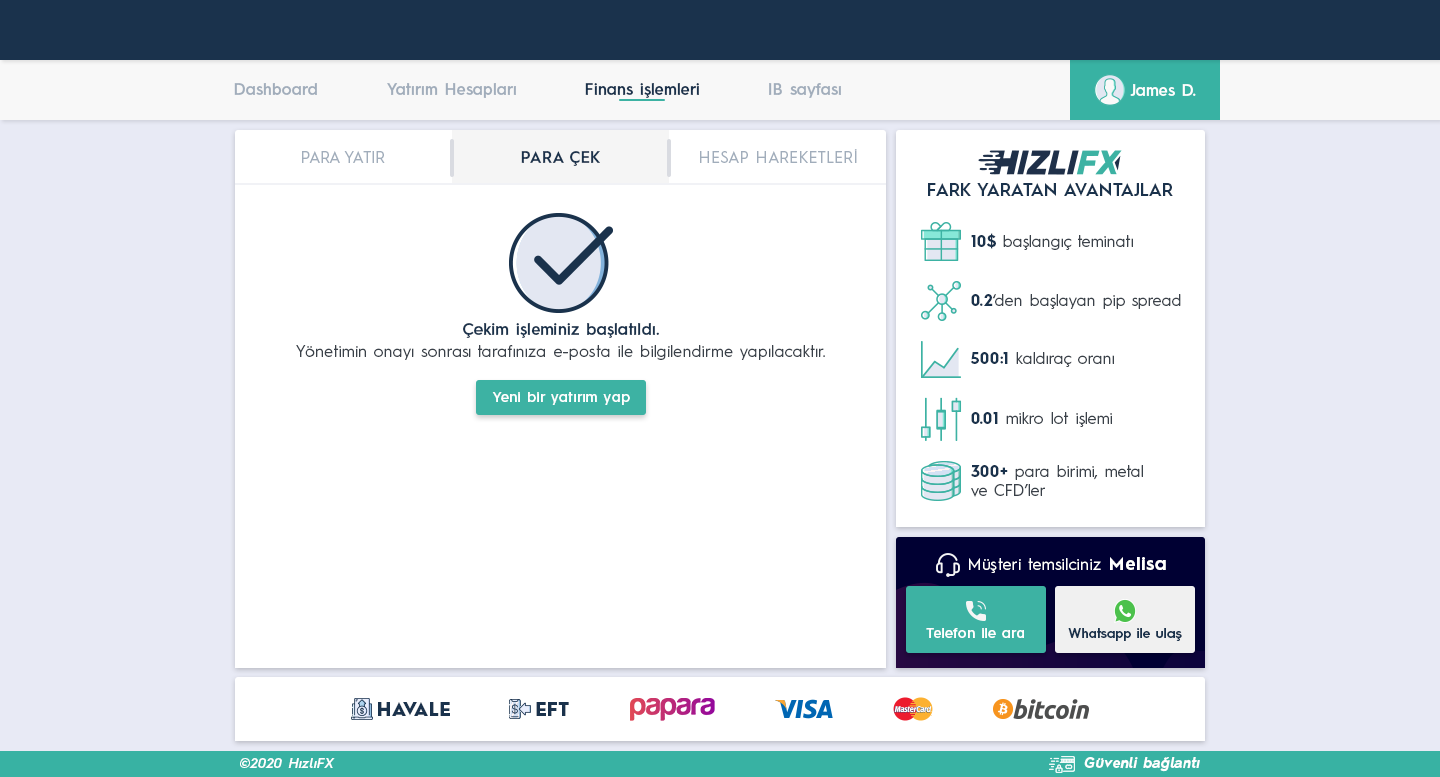
<style>
.page{position:relative;width:1440px;height:777px;background:#ffffff}
.page>*{position:absolute;margin:0}
.t1{font:16px "HurmeGeometricSans3-SemiBold";color:#a1adbb}
.t2{font:16px "HurmeGeometricSans3-SemiBold";color:#1a324c}
.t3{font:16px "HurmeGeometricSans3-SemiBold";color:#fefefe}
.t4{font:16px "HurmeGeometricSans1-Regular";letter-spacing:0.01em;color:#a1adbb}
.t5{font:16px "HurmeGeometricSans1-SemiBold";letter-spacing:0.01em;color:#1a324c}
.t6{font:18px "HurmeGeometricSans1-SemiBold";color:#1a324c}
.t7{font:16px "HurmeGeometricSans1-Regular";color:#3a4149}
.t8{font:16px "HurmeGeometricSans1-Bold";color:#1a324c}
.t9{font:16px "HurmeGeometricSans3-SemiBold";letter-spacing:0.01em;color:#1a324c}
.t10{font:16px "HurmeGeometricSans1-Regular";letter-spacing:0.01em;color:#3a4149}
.t11{font:14px "HurmeGeometricSans3-SemiBold";letter-spacing:0.025em;color:#ffffff}
.t12{font:16px "HurmeGeometricSans1-Regular";letter-spacing:0.025em;color:#ffffff}
.t13{font:18px "HurmeGeometricSans1-Bold";letter-spacing:0.05em;color:#ffffff}
.t14{font:14px "HurmeGeometricSans3-SemiBold";letter-spacing:0.01em;color:#ffffff}
.t15{font:13.5px "HurmeGeometricSans3-SemiBold";letter-spacing:0.01em;color:#1a324c}
.t16{font:18px "HurmeGeometricSans1-Black";letter-spacing:0.025em;color:#1a324c}
.t17{font:14px "HurmeGeometricSans2-SemiBoldObl";letter-spacing:0.025em;color:#ffffff}
.t18{font:14px "HurmeGeometricSans2-BoldObl";letter-spacing:0.025em;color:#ffffff}
</style>
<div class="page">
<p class="t1" style="left:234px;top:83px;width:83px;height:12px">Dashboard</p>
<p class="t1" style="left:387px;top:83px;width:129px;height:15px">Yatırım Hesapları</p>
<p class="t2" style="left:585px;top:83px;width:114px;height:15px">Finans işlemleri</p>
<p class="t1" style="left:769px;top:83px;width:72px;height:15px">IB sayfası</p>
<p class="t3" style="left:1130px;top:84px;width:66px;height:12px">James D.</p>
<p class="t4" style="left:700px;top:149px;width:157px;height:14px">HESAP HAREKETLERİ</p>
<p class="t4" style="left:302px;top:151px;width:83px;height:12px">PARA YATIR</p>
<p class="t5" style="left:521px;top:151px;width:79px;height:15px">PARA ÇEK</p>
<p class="t6" style="left:928px;top:183px;width:245px;height:13px">FARK YARATAN AVANTAJLAR</p>
<p class="t7" style="left:971px;top:233px;width:162px;height:17px"><span class="t8">10$</span> başlangıç teminatı</p>
<p class="t7" style="left:971px;top:294px;width:210px;height:15px"><span class="t8">0.2</span>‘den başlayan pip spread</p>
<p class="t9" style="left:463px;top:323px;width:196px;height:15px">Çekim işleminiz başlatıldı.</p>
<p class="t10" style="left:296px;top:345px;width:529px;height:15px">Yönetimin onayı sonrası tarafınıza e-posta ile bilgilendirme yapılacaktır.</p>
<p class="t7" style="left:970px;top:352px;width:144px;height:15px"><span class="t8">500:1</span> kaldıraç oranı</p>
<p class="t11" style="left:492px;top:392px;width:138px;height:13px">Yeni bir yatırım yap</p>
<p class="t7" style="left:971px;top:412px;width:141px;height:15px"><span class="t8">0.01</span> mikro lot işlemi</p>
<p class="t7" style="left:971px;top:465px;width:172px;height:32px"><span class="t8">300+</span> para birimi, metal<br>ve CFD’ler</p>
<p class="t12" style="left:969px;top:557px;width:197px;height:16px">Müşteri temsilciniz <span class="t13">Melisa</span></p>
<p class="t14" style="left:926px;top:628px;width:98px;height:10px">Telefon ile ara</p>
<p class="t15" style="left:1068px;top:628px;width:114px;height:13px">Whatsapp ile ulaş</p>
<p class="t16" style="left:378px;top:702px;width:72px;height:14px">HAVALE</p>
<p class="t16" style="left:536px;top:702px;width:33px;height:14px">EFT</p>
<p class="t17" style="left:240px;top:758px;width:95px;height:10px">©2020 HızlıFX</p>
<p class="t18" style="left:1084px;top:757px;width:116px;height:15px">Güvenli bağlantı</p>
</div>
